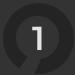
<style>
.page{position:relative;width:75px;height:75px;background:#333333}
.page>*{position:absolute;margin:0}
.t1{font:33.4px "Montserrat-SemiBold";color:#e5e5e5}
</style>
<div class="page">
<p class="t1" style="left:32px;top:26px;width:10px;height:24px">1</p>
</div>
